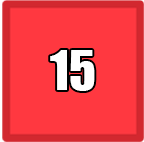
<style>
.page{position:relative;width:144px;height:142px;background:#ff3840}
.page>*{position:absolute;margin:0}
.t1{font:50px "Impact";color:#ffffff}
</style>
<div class="page">
<p class="t1" style="left:50px;top:50px;width:45px;height:41px">15</p>
</div>
